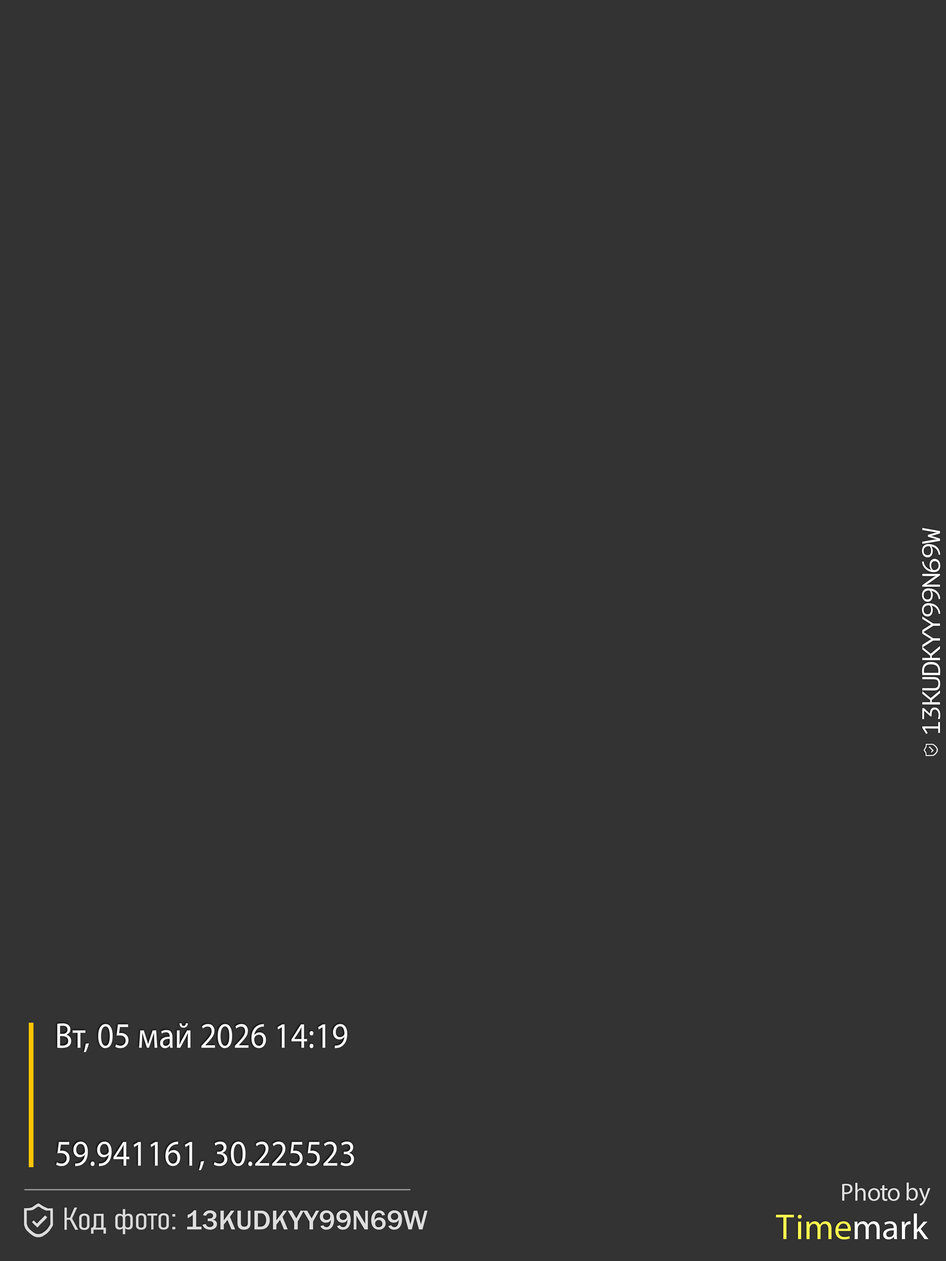
<style>
.page{position:relative;width:946px;height:1261px;background:#333333}
.page>*{position:absolute;margin:0}
.t1{font:25.3px "PTMono-Regular";letter-spacing:-0.088em;color:#ffffff;scale:1.11 1}
.t2{font:36px "MyriadPro-Regular";color:#f8f8f8;scale:0.91 1}
.t3{font:36.6px "MyriadPro-Regular";color:#f8f8f8;scale:0.91 1}
.t4{font:28.1px "FranklinGothic-Medium";color:#dedede}
</style>
<div class="page">
<p class="t1" style="left:922px;top:528px;width:18px;height:206px;rotate:-90deg">13KUDKYY99N69W</p>
<p class="t2" style="left:57px;top:1023px;width:290px;height:29px">Вт, 05 май 2026 14:19</p>
<p class="t3" style="left:56px;top:1141px;width:298px;height:29px">59.941161, 30.225523</p>
<p class="t4" style="left:187px;top:1210px;width:240px;height:20px">13KUDKYY99N69W</p>
</div>
